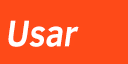
<style>
.page{position:relative;width:128px;height:64px;background:#fe4a18}
.page>*{position:absolute;margin:0}
.t1{font:37.8px "FogSansIt";color:#ffffff;scale:0.87 1}
</style>
<div class="page">
<p class="t1" style="left:8px;top:20px;width:71px;height:27px">Usar</p>
</div>
